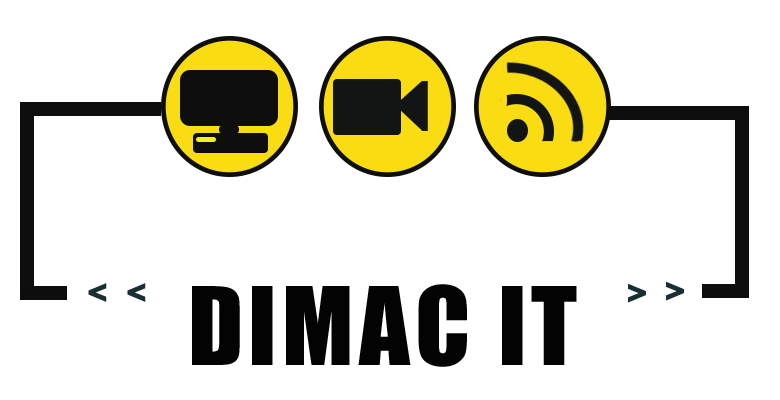
<style>
.page{position:relative;width:780px;height:400px;background:#ffffff}
.page>*{position:absolute;margin:0}
.t1{font:37.5px "Impact";color:#183034}
.t2{font:100px "Impact";letter-spacing:0.05em;color:#030303}
</style>
<div class="page">
<p class="t1" style="left:666px;top:281px;width:18px;height:20px">&gt;</p>
<p class="t1" style="left:88px;top:283px;width:19px;height:19px">&lt;</p>
<p class="t1" style="left:127px;top:283px;width:19px;height:19px">&lt;</p>
<p class="t2" style="left:192px;top:284px;width:385px;height:83px">DIMAC IT</p>
<p class="t1" style="left:628px;top:283px;width:18px;height:20px">&gt;</p>
</div>
